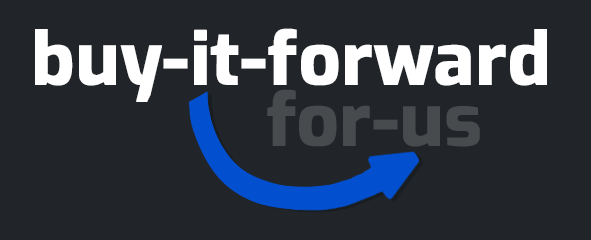
<style>
.page{position:relative;width:591px;height:240px;background:#212529}
.page>*{position:absolute;margin:0}
.t1{font:72px "Exo-Bold";color:#ffffff;font-weight:bold}
.t2{font:72px "Exo-Bold";color:#484b4d;font-weight:bold}
</style>
<div class="page">
<p class="t1" style="left:35px;top:28px;width:512px;height:74px">buy-it-forward</p>
<p class="t2" style="left:267px;top:89px;width:213px;height:58px">for-us</p>
</div>
